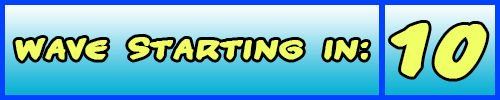
<style>
.page{position:relative;width:500px;height:100px}
.page>*{position:absolute;margin:0}
.t1{font:99px "Handycandy";color:#efff64;font-weight:bold}
.t2{font:36px "Handycandy";color:#efff64;font-weight:bold}
</style>
<div class="page">
<p class="t1" style="left:391px;top:23px;width:96px;height:56px">10</p>
<p class="t2" style="left:15px;top:37px;width:354px;height:24px">WAVE STARTING IN:</p>
</div>
